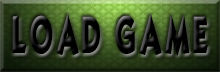
<style>
.page{position:relative;width:220px;height:72px}
.page>*{position:absolute;margin:0}
.t1{font:44.5px "KabelBook";letter-spacing:0.1em;color:#000000;text-transform:uppercase;font-weight:bold;scale:0.54 1}
</style>
<div class="page">
<p class="t1" style="left:12px;top:14px;width:196px;height:42px">LOaD GAME</p>
</div>
